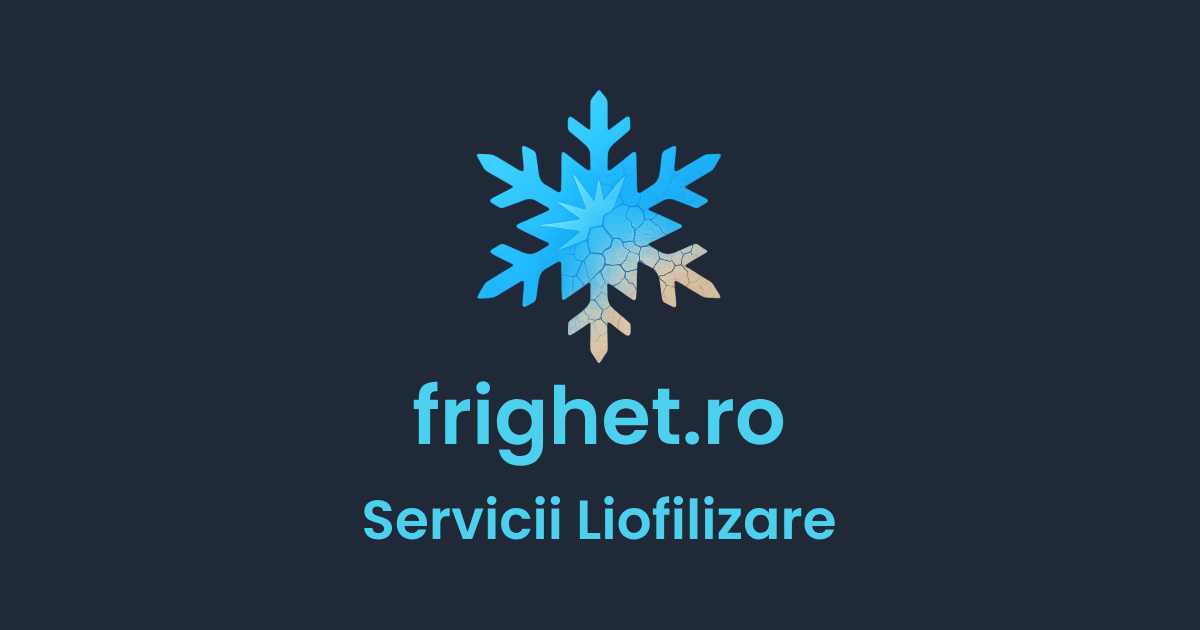
<style>
.page{position:relative;width:1200px;height:630px;background:#202937}
.page>*{position:absolute;margin:0}
.t1{font:80px "Poppins-SemiBold";color:#4bd0ee}
.t2{font:55px "Poppins-SemiBold";color:#4bd0ee}
</style>
<div class="page">
<p class="t1" style="left:413px;top:381px;width:371px;height:85px">frighet.ro</p>
<p class="t2" style="left:364px;top:495px;width:471px;height:45px">Servicii Liofilizare</p>
</div>
